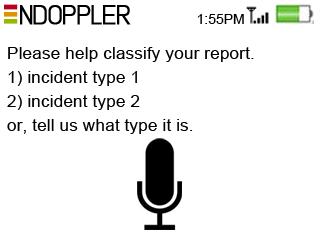
<style>
.page{position:relative;width:320px;height:240px;background:#ffffff}
.page>*{position:absolute;margin:0}
.t1{font:46.4px "Lintel";letter-spacing:-0.05em;color:#000000;font-variant:small-caps;font-weight:bold}
.t2{font:46.4px "Lintel";color:#ffffff;font-variant:small-caps}
.t3{font:24px "ArialMT";color:#000000}
.t4{font:30px/24px "ArialMT";color:#000000}
</style>
<div class="page">
<p class="t1" style="left:20px;top:5px;width:111px;height:20px"><span class="t2">  </span>NDOPPLER</p>
<p class="t3" style="left:197px;top:14px;width:47px;height:10px">1:55PM</p>
<p class="t4" style="left:7px;top:47px;width:247px;height:87px">Please help classify your report.<br>1) incident type 1<br>2) incident type 2<br>or, tell us what type it is.</p>
</div>
